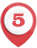
<style>
.page{position:relative;width:37px;height:48px;background:#ffffff}
.page>*{position:absolute;margin:0}
.t1{font:19px "LatinWide";letter-spacing:0.06em;color:#dd4c54;scale:0.61 1}
</style>
<div class="page">
<p class="t1" style="left:12px;top:13px;width:13px;height:14px">5</p>
</div>
